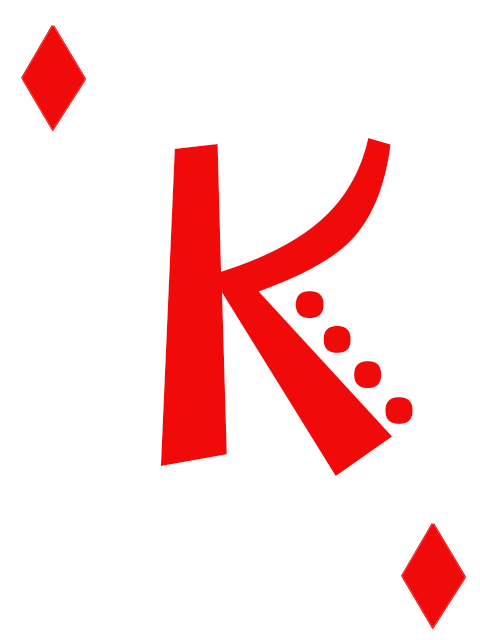
<style>
.page{position:relative;width:480px;height:640px;background:#ffffff}
.page>*{position:absolute;margin:0}
.t1{font:386.3px "Jokerman-Regular";color:#f10a0a}
</style>
<div class="page">
<p class="t1" style="left:160px;top:138px;width:253px;height:338px">K</p>
</div>
